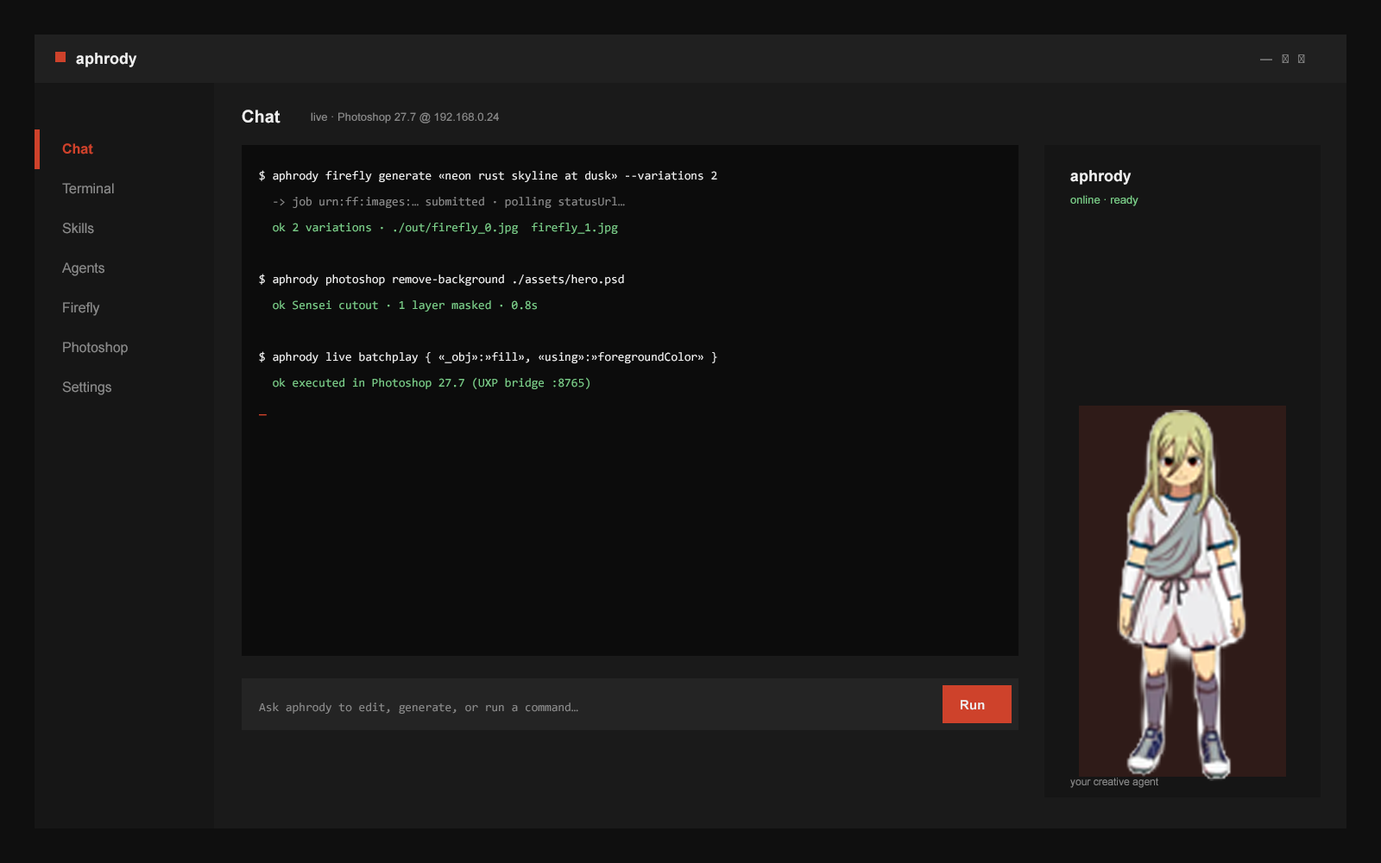
<style>
.page{position:relative;width:1381px;height:863px;background:#0c0c0c}
.page>*{position:absolute;margin:0}
.t1{font:15.5px "Arial-BoldMT";color:#f0f0f0}
.t2{font:12.1px "MyriadPro-Regular";color:#8a8a8a}
.t3{font:12.1px "ArialMT";color:#8a8a8a}
.t4{font:17.3px "Arial-BoldMT";color:#f0f0f0}
.t5{font:11.2px "ArialMT";color:#8a8a8a}
.t6{font:13.8px "Arial-BoldMT";color:#ce422b}
.t7{font:12.1px "Consolas";color:#f0f0f0}
.t8{font:13.8px "ArialMT";color:#8a8a8a}
.t9{font:12.1px "Consolas";color:#8a8a8a}
.t10{font:11.2px "ArialMT";color:#7ccf8a}
.t11{font:12.1px "Consolas";color:#7ccf8a}
.t12{font:13.8px "Consolas";color:#ce422b}
.t13{font:12.9px "Arial-BoldMT";color:#f0f0f0}
.t14{font:10.4px "ArialMT";color:#8a8a8a}
</style>
<div class="page">
<p class="t1" style="left:76px;top:53px;width:61px;height:14px">aphrody</p>
<p class="t2" style="left:1260px;top:54px;width:45px;height:9px"><span class="t3">—   </span>▢   ✕</p>
<p class="t4" style="left:242px;top:110px;width:39px;height:13px">Chat</p>
<p class="t5" style="left:311px;top:112px;width:188px;height:11px">live · Photoshop 27.7 @ 192.168.0.24</p>
<p class="t6" style="left:62px;top:143px;width:31px;height:12px">Chat</p>
<p class="t7" style="left:259px;top:170px;width:458px;height:12px">$ aphrody firefly generate «neon rust skyline at dusk» --variations 2</p>
<p class="t1" style="left:1070px;top:170px;width:62px;height:15px">aphrody</p>
<p class="t8" style="left:62px;top:183px;width:52px;height:11px">Terminal</p>
<p class="t9" style="left:274px;top:197px;width:351px;height:11px">-&gt; job urn:ff:images:… submitted · polling statusUrl…</p>
<p class="t10" style="left:1070px;top:195px;width:69px;height:11px">online · ready</p>
<p class="t8" style="left:62px;top:223px;width:32px;height:11px">Skills</p>
<p class="t11" style="left:273px;top:223px;width:345px;height:11px">ok 2 variations · ./out/firefly_0.jpg  firefly_1.jpg</p>
<p class="t8" style="left:62px;top:262px;width:42px;height:14px">Agents</p>
<p class="t7" style="left:259px;top:274px;width:365px;height:12px">$ aphrody photoshop remove-background ./assets/hero.psd</p>
<p class="t8" style="left:63px;top:302px;width:37px;height:14px">Firefly</p>
<p class="t11" style="left:273px;top:300px;width:264px;height:12px">ok Sensei cutout · 1 layer masked · 0.8s</p>
<p class="t8" style="left:63px;top:342px;width:65px;height:14px">Photoshop</p>
<p class="t7" style="left:259px;top:351px;width:458px;height:12px">$ aphrody live batchplay { «_obj»:»fill», «using»:»foregroundColor» }</p>
<p class="t11" style="left:273px;top:377px;width:317px;height:12px">ok executed in Photoshop 27.7 (UXP bridge :8765)</p>
<p class="t8" style="left:62px;top:382px;width:49px;height:13px">Settings</p>
<p class="t12" style="left:259px;top:414px;width:8px;height:2px">_</p>
<p class="t13" style="left:961px;top:700px;width:24px;height:10px">Run</p>
<p class="t9" style="left:259px;top:703px;width:319px;height:11px">Ask aphrody to edit, generate, or run a command…</p>
<p class="t14" style="left:1070px;top:778px;width:89px;height:10px">your creative agent</p>
</div>
